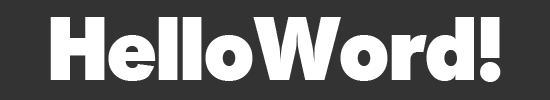
<style>
.page{position:relative;width:550px;height:100px;background:#333333}
.page>*{position:absolute;margin:0}
.t1{font:87.5px "Montreal-Heavy";color:#ffffff}
</style>
<div class="page">
<p class="t1" style="left:50px;top:17px;width:451px;height:65px">HelloWord!</p>
</div>
